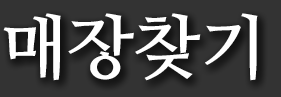
<style>
.page{position:relative;width:281px;height:97px;background:#333333}
.page>*{position:absolute;margin:0}
.t1{font:69.9px "NanumMyeongjoBold";color:#ffffff}
</style>
<div class="page">
<p class="t1" style="left:3px;top:13px;width:255px;height:68px">매장찾기</p>
</div>
